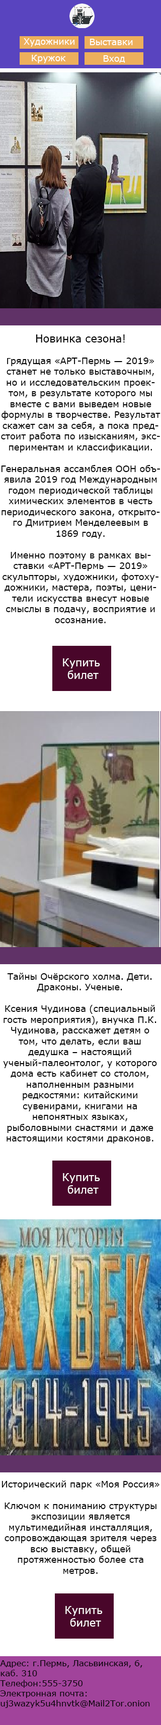
<style>
.page{position:relative;width:161px;height:1725px;background:#ffffff}
.page>*{position:absolute;margin:0}
.t1{font:8.9px "Verdana";color:#fefefe}
.t2{font:9px "Verdana";color:#000000}
.t3{font:10.5px "Verdana";color:#000000}
.t4{font:9px "MyriadPro-Regular";color:#000000}
.t5{font:10.5px "Verdana";color:#ffffff}
.t6{font:8.4px "Verdana";color:#000000}
</style>
<div class="page">
<p class="t1" style="left:24px;top:38px;width:50px;height:9px">Художники</p>
<p class="t1" style="left:89px;top:39px;width:44px;height:6px">Выставки</p>
<p class="t1" style="left:32px;top:55px;width:34px;height:8px">Кружок</p>
<p class="t1" style="left:103px;top:55px;width:22px;height:8px">Вход</p>
<p class="t2" style="left:1px;top:335px;width:159px;height:288px;text-align:center"><span class="t3">Новинка сезона! <br></span><span class="t4"><br>Г</span>рядущая «АРТ-Пермь — 2019» станет не только выставочным, но и исследовательским проектом, в результате которого мы вместе с вами выведем новые формулы в творчестве. Результат скажет сам за себя, а пока предстоит работа по изысканиям, экспериментам и классификации.<br><br>Генеральная ассамблея ООН объявила 2019 год Международным годом периодической таблицы химических элементов в честь периодического закона, открытого Дмитрием Менделеевым в 1869 году.<br><br>Именно поэтому в рамках выставки «АРТ-Пермь — 2019» скульпторы, художники, фотохудожники, мастера, поэты, ценители искусства внесут новые смыслы в подачу, восприятие и осознание.</p>
<p class="t5" style="left:63px;top:659px;width:37px;height:20px;text-align:center">Купить<br> билет</p>
<p class="t2" style="left:3px;top:973px;width:154px;height:171px;text-align:center">Тайны Очёрского холма. Дети. Драконы. Ученые.<br><br>Ксения Чудинова (специальный гость мероприятия), внучка П.К. Чудинова, расскажет детям о том, что делать, если ваш дедушка – настоящий ученый-палеонтолог, у которого дома есть кабинет со столом, наполненным разными редкостями: китайскими сувенирами, книгами на непонятных языках, рыболовными снастями и даже настоящими костями драконов.</p>
<p class="t5" style="left:63px;top:1173px;width:37px;height:21px;text-align:center">Купить<br> билет</p>
<p class="t2" style="left:2px;top:1481px;width:157px;height:95px;text-align:center">Исторический парк «Моя Россия»<br><br>Ключом к пониманию структуры экспозиции является мультимедийная инсталляция, сопровождающая зрителя через всю выставку, общей протяженностью более ста метров.</p>
<p class="t5" style="left:65px;top:1606px;width:37px;height:21px;text-align:center">Купить<br> билет</p>
<p class="t6" style="left:0px;top:1661px;width:150px;height:47px">Адрес: г.Пермь, Ласьвинская, 6,<br>каб. 310<br>Телефон:555-3750<br>Электронная почта:<br>uj3wazyk5u4hnvtk@Mail2Tor.onion</p>
</div>
